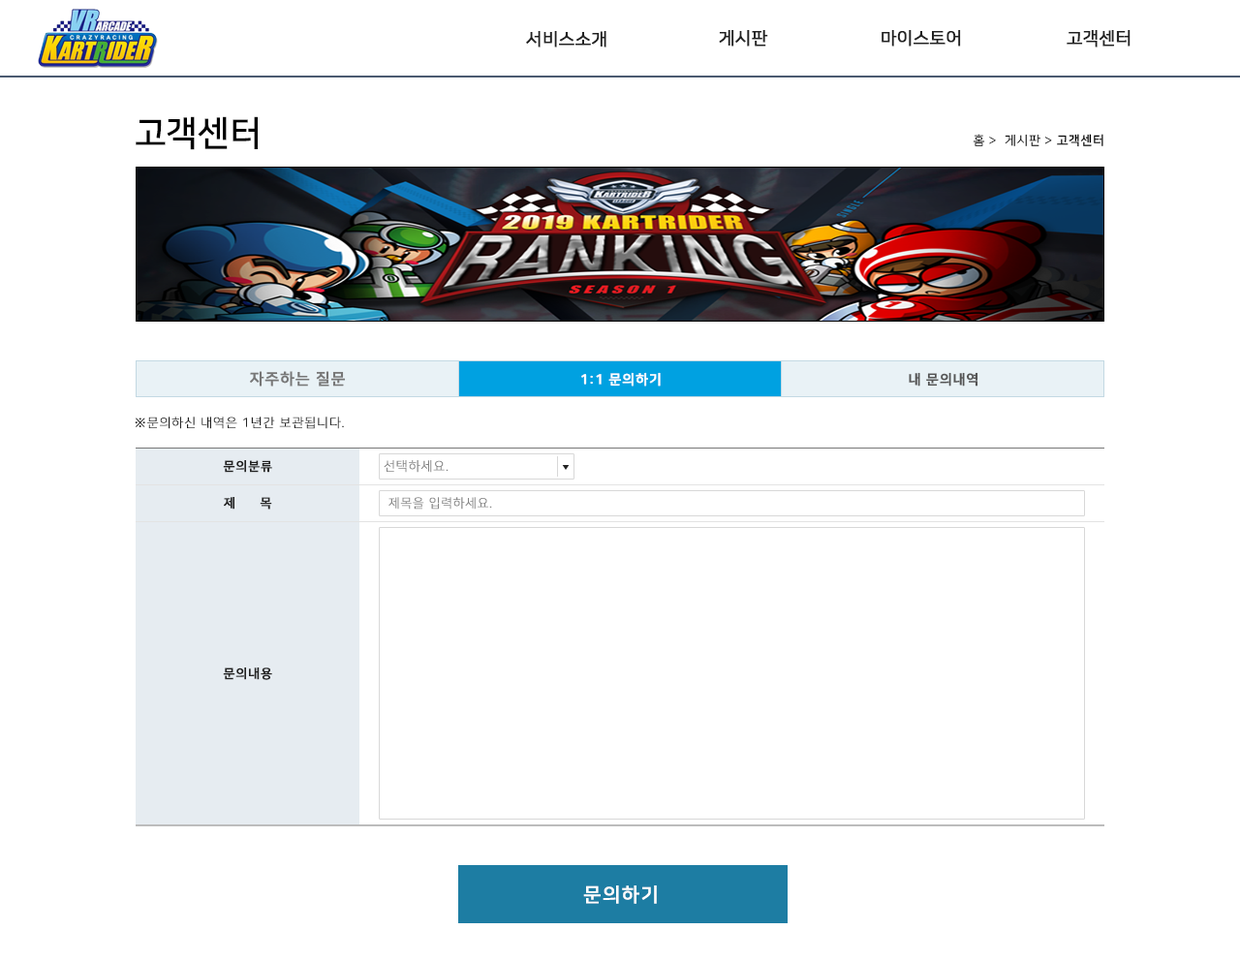
<style>
.page{position:relative;width:1240px;height:961px;background:#ffffff}
.page>*{position:absolute;margin:0}
.t1{font:17.4px "NanumSquareR";color:#222222;font-weight:bold}
.t2{font:34.9px "NanumSquareB";color:#000000}
.t3{font:12.6px "NanumSquareR";letter-spacing:0.05em;color:#000000}
.t4{font:12.6px "NanumSquareL";letter-spacing:0.05em;color:#000000}
.t5{font:12.6px "NanumSquareB";letter-spacing:0.05em;color:#000000}
.t6{font:15.5px "NanumSquareB";letter-spacing:0.05em;color:#777777;font-weight:bold}
.t7{font:13.6px "NanumSquareB";letter-spacing:0.05em;color:#ffffff;font-weight:bold}
.t8{font:13.6px "NanumSquareB";letter-spacing:0.05em;color:#555555;font-weight:bold}
.t9{font:12.6px "NanumSquareL";letter-spacing:0.05em;color:#222222;text-transform:uppercase;font-weight:bold}
.t10{font:12.6px "NanumSquareB";letter-spacing:0.05em;color:#222222;text-transform:uppercase;font-weight:bold}
.t11{font:12.9px "NanumSquareL";letter-spacing:0.05em;color:#838383;text-transform:uppercase;font-weight:bold}
.t12{font:12.6px "NanumSquareB";letter-spacing:1.95em;color:#222222;text-transform:uppercase;font-weight:bold}
.t13{font:12.6px "NanumSquareL";letter-spacing:0.05em;color:#838383;text-transform:uppercase;font-weight:bold}
.t14{font:19.4px "NanumSquareB";letter-spacing:0.05em;color:#ffffff;text-transform:uppercase;font-weight:bold}
</style>
<div class="page">
<p class="t1" style="left:719px;top:29px;width:49px;height:18px">게시판</p>
<p class="t1" style="left:882px;top:29px;width:79px;height:18px">마이스토어</p>
<p class="t1" style="left:1067px;top:29px;width:64px;height:18px">고객센터</p>
<p class="t1" style="left:526px;top:30px;width:81px;height:17px">서비스소개</p>
<p class="t2" style="left:136px;top:116px;width:122px;height:34px">고객센터</p>
<p class="t3" style="left:973px;top:134px;width:131px;height:13px">홈 <span class="t4">&gt; </span> 게시판 &gt; <span class="t5">고객센터</span></p>
<p class="t6" style="left:250px;top:371px;width:96px;height:16px">자주하는 질문</p>
<p class="t7" style="left:581px;top:372px;width:80px;height:15px">1:1 문의하기</p>
<p class="t8" style="left:909px;top:372px;width:70px;height:15px">내 문의내역</p>
<p class="t9" style="left:135px;top:417px;width:209px;height:12px">※문의하신 내역은 1년간 보관됩니다.</p>
<p class="t10" style="left:223px;top:460px;width:49px;height:13px">문의분류</p>
<p class="t11" style="left:384px;top:460px;width:65px;height:13px">선택하세요.</p>
<p class="t12" style="left:224px;top:497px;width:48px;height:13px">제<span class="t10">목</span></p>
<p class="t13" style="left:389px;top:497px;width:103px;height:13px">제목을 입력하세요.</p>
<p class="t10" style="left:223px;top:668px;width:49px;height:12px">문의내용</p>
<p class="t14" style="left:583px;top:886px;width:74px;height:18px">문의하기</p>
</div>
